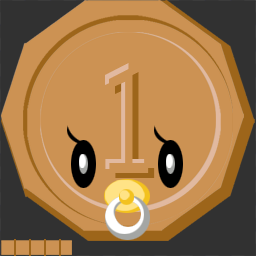
<style>
.page{position:relative;width:256px;height:256px;background:#cc9253}
.page>*{position:absolute;margin:0}
.t1{font:136.6px "MicrosoftJhengHeiRegular";scale:0.67 1}
.t2{font:136.6px "MicrosoftJhengHeiRegular";color:#9d651a;scale:0.67 1}
</style>
<div class="page">
<p class="t1" style="left:105px;top:63px;width:40px;height:106px">1</p>
<p class="t2" style="left:115px;top:72px;width:40px;height:106px">1</p>
</div>
